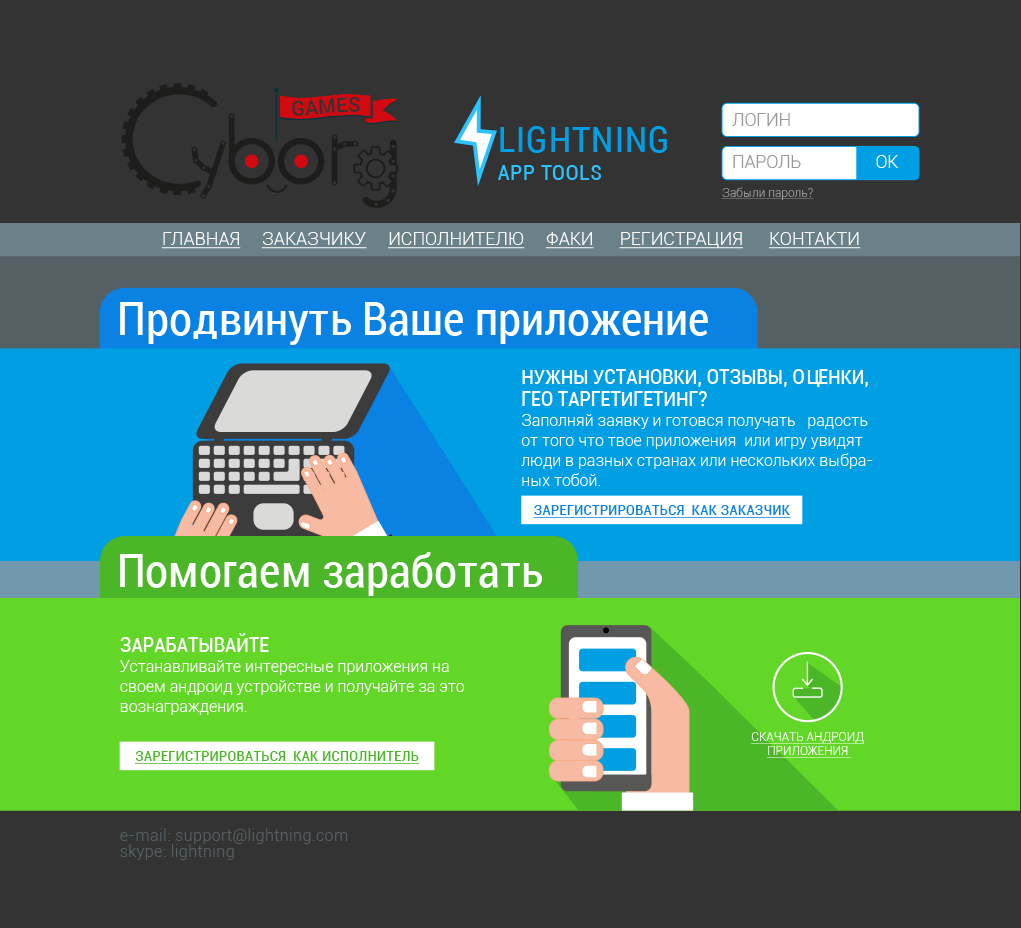
<style>
.page{position:relative;width:1021px;height:928px;background:#333333}
.page>*{position:absolute;margin:0}
.t1{font:17.7px "Roboto-Light";color:#999999;text-transform:uppercase}
.t2{font:37.4px "Roboto-Condensed";letter-spacing:0.025em;color:#009ee3;text-transform:uppercase}
.t3{font:17.7px "Roboto-Light";color:#ffffff;text-transform:uppercase}
.t4{font:22.4px "Roboto-Condensed";letter-spacing:0.025em;color:#2cc3ff;text-transform:uppercase}
.t5{font:12px "Roboto-Light";color:#999999;text-decoration:underline}
.t6{font:18px "Roboto-Light";color:#ffffff;text-transform:uppercase;text-decoration:underline}
.t7{font:48px "Roboto-Condensed";color:#ffffff}
.t8{font:16px/20px "Roboto-Light";color:#ffffff}
.t9{font:21px/22px "Roboto-Condensed";color:#ffffff;text-transform:uppercase}
.t10{font:15px "Roboto-Condensed";letter-spacing:0.025em;color:#0a82e3;text-transform:uppercase;text-decoration:underline}
.t11{font:21px/20px "Roboto-Condensed";color:#ffffff;text-transform:uppercase}
.t12{font:12px/14px "Roboto-Light";color:#ffffff;text-transform:uppercase;text-decoration:underline}
.t13{font:15px "Roboto-Condensed";letter-spacing:0.025em;color:#4bb627;text-transform:uppercase;text-decoration:underline}
.t14{font:16px/16px "Roboto-Light";letter-spacing:0.025em;color:#546063}
</style>
<div class="page">
<p class="t1" style="left:732px;top:113px;width:58px;height:13px">логин</p>
<p class="t2" style="left:500px;top:126px;width:167px;height:27px">lightning</p>
<p class="t1" style="left:733px;top:155px;width:68px;height:13px">Пароль</p>
<p class="t3" style="left:876px;top:155px;width:23px;height:13px">ОК</p>
<p class="t4" style="left:498px;top:165px;width:103px;height:15px">app tools</p>
<p class="t5" style="left:721px;top:187px;width:93px;height:13px">Забыли пароль?</p>
<p class="t6" style="left:161px;top:232px;width:700px;height:17px">Главная     Заказчику     Исполнителю     Факи      регистрация      контакти</p>
<p class="t7" style="left:120px;top:302px;width:588px;height:43px">Продвинуть Ваше приложение</p>
<p class="t8" style="left:521px;top:369px;width:352px;height:117px"><span class="t9">Нужны Установки, отзывы, оценки, гео таргетигетинг?<br></span>Заполняй заявку и готовся получать   радость от того что твое приложения  или игру увидят люди в разных странах или нескольких выбраных тобой.</p>
<p class="t10" style="left:533px;top:505px;width:258px;height:13px">Зарегистрироваться  как заказчик</p>
<p class="t7" style="left:120px;top:552px;width:422px;height:44px">Помогаем заработать</p>
<p class="t8" style="left:120px;top:633px;width:345px;height:82px"><span class="t11">Зарабатывайте<br></span>Устанавливайте интересные приложения на своем андроид устройстве и получайте за это вознаграждения.</p>
<p class="t12" style="left:751px;top:732px;width:114px;height:26px;text-align:center">сКАЧАТЬ АНДРОИД ПРИЛОЖЕНИЯ</p>
<p class="t13" style="left:135px;top:751px;width:285px;height:13px">Зарегистрироваться  как исполнитель</p>
<p class="t14" style="left:120px;top:828px;width:228px;height:32px">e-mail: support@lightning.com <br>skype: lightning</p>
</div>
